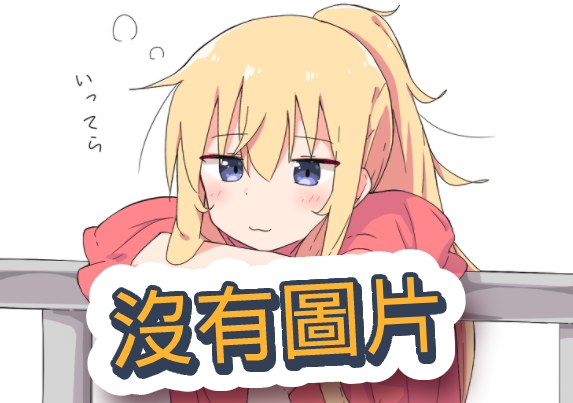
<style>
.page{position:relative;width:573px;height:403px;background:#ffffff}
.page>*{position:absolute;margin:0}
.t1{font:84.9px "DroidSansFallback";color:#ffb430}
</style>
<div class="page">
<p class="t1" style="left:113px;top:277px;width:325px;height:91px;rotate:-3deg">沒有圖片</p>
</div>
